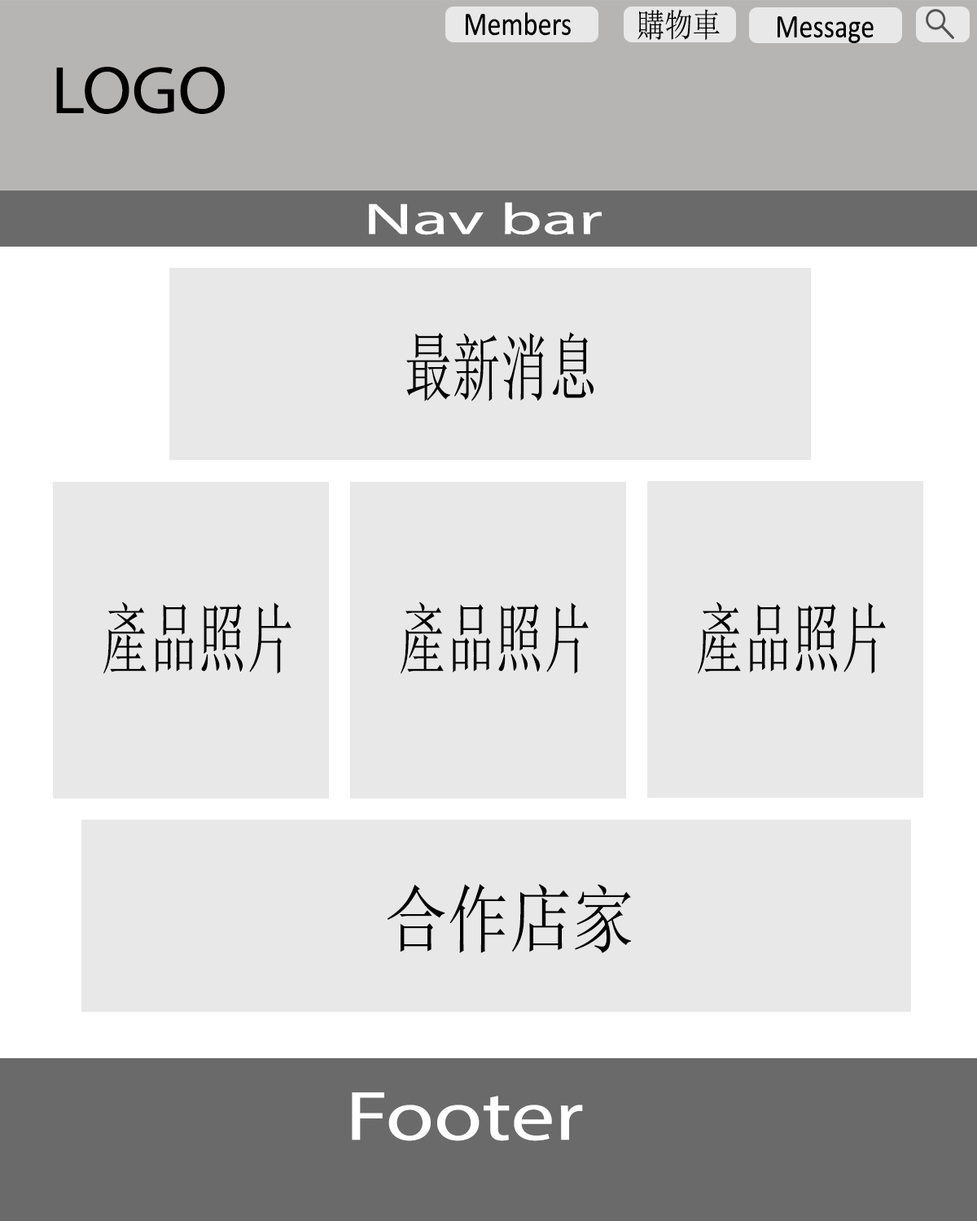
<style>
.page{position:relative;width:977px;height:1221px;background:#e8e8e8}
.page>*{position:absolute;margin:0}
.t1{font:32.9px "Calibri";color:#000000;scale:0.84 1}
.t2{font:32.9px "SimSun";color:#000000;scale:0.84 1}
.t3{font:67.6px "MyriadPro-Regular";color:#000000;scale:1.06 1}
.t4{font:44.2px "MyriadPro-Regular";color:#ffffff;scale:1.69 1}
.t5{font:74.4px "SimSun";color:#000000;scale:0.65 1}
.t6{font:77.5px "SimSun";color:#000000;scale:0.62 1}
.t7{font:74.4px "SimSun";color:#000000;scale:0.84 1}
.t8{font:70.2px "MyriadPro-Regular";color:#ffffff;scale:1.25 1}
</style>
<div class="page">
<p class="t1" style="left:466px;top:12px;width:105px;height:24px">Members</p>
<p class="t2" style="left:637px;top:9px;width:83px;height:31px">購物車</p>
<p class="t1" style="left:777px;top:16px;width:96px;height:27px">Message</p>
<p class="t3" style="left:56px;top:67px;width:169px;height:47px">LOGO</p>
<p class="t4" style="left:369px;top:202px;width:232px;height:33px">Nav bar</p>
<p class="t5" style="left:406px;top:332px;width:187px;height:69px">最新消息</p>
<p class="t6" style="left:103px;top:601px;width:188px;height:73px">產品照片</p>
<p class="t6" style="left:400px;top:601px;width:188px;height:73px">產品照片</p>
<p class="t6" style="left:698px;top:601px;width:188px;height:73px">產品照片</p>
<p class="t7" style="left:387px;top:884px;width:244px;height:69px">合作店家</p>
<p class="t8" style="left:352px;top:1092px;width:231px;height:49px">Footer</p>
</div>
